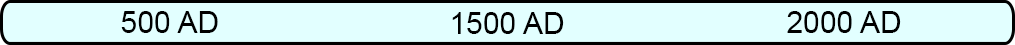
<style>
.page{position:relative;width:1015px;height:45px;background:#e2ffff}
.page>*{position:absolute;margin:0}
.t1{font:30px "ArialMT";color:#000000}
</style>
<div class="page">
<p class="t1" style="left:121px;top:11px;width:97px;height:22px">500 AD</p>
<p class="t1" style="left:452px;top:12px;width:112px;height:22px">1500 AD</p>
<p class="t1" style="left:787px;top:11px;width:114px;height:22px">2000 AD</p>
</div>
